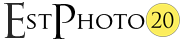
<style>
.page{position:relative;width:180px;height:40px;background:#ffffff}
.page>*{position:absolute;margin:0}
.t1{font:35.1px "TrajanPro-Regular";color:#282828}
.t2{font:46.8px "TrajanPro-Regular";color:#000000}
.t3{font:23.4px "TrajanPro-Regular";color:#000000}
</style>
<div class="page">
<p class="t1" style="left:4px;top:2px;width:22px;height:36px">E</p>
<p class="t2" style="left:52px;top:4px;width:23px;height:35px">P</p>
<p class="t3" style="left:27px;top:14px;width:25px;height:15px">st</p>
<p class="t3" style="left:77px;top:13px;width:68px;height:16px">hoto</p>
</div>
